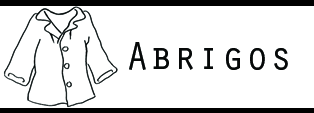
<style>
.page{position:relative;width:314px;height:113px;background:#ffffff}
.page>*{position:absolute;margin:0}
.t1{font:40px "OratorStd";color:#060808}
</style>
<div class="page">
<p class="t1" style="left:129px;top:42px;width:159px;height:28px">Abrigos</p>
</div>
